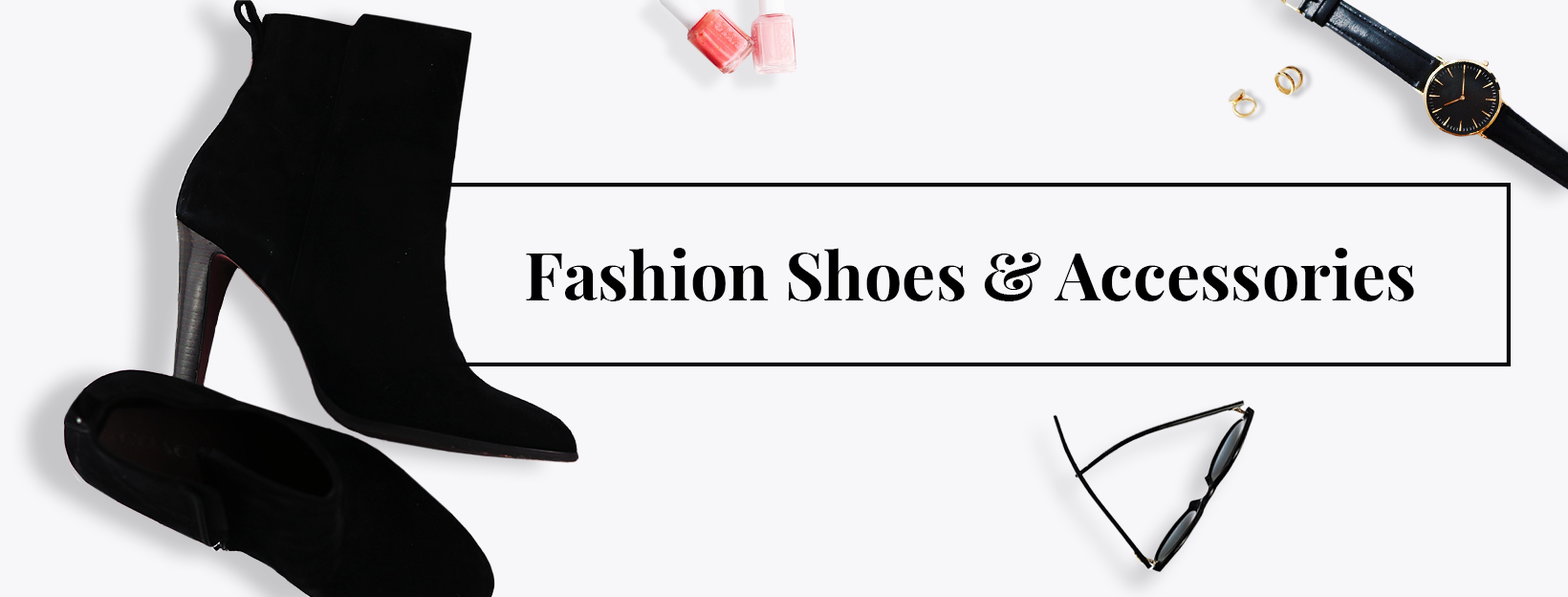
<style>
.page{position:relative;width:1568px;height:597px;background:#f7f6f9}
.page>*{position:absolute;margin:0}
.t1{font:66.9px "PlayfairDisplay-Bold";color:#000000}
</style>
<div class="page">
<p class="t1" style="left:526px;top:248px;width:888px;height:53px">Fashion Shoes &amp; Accessories</p>
</div>
